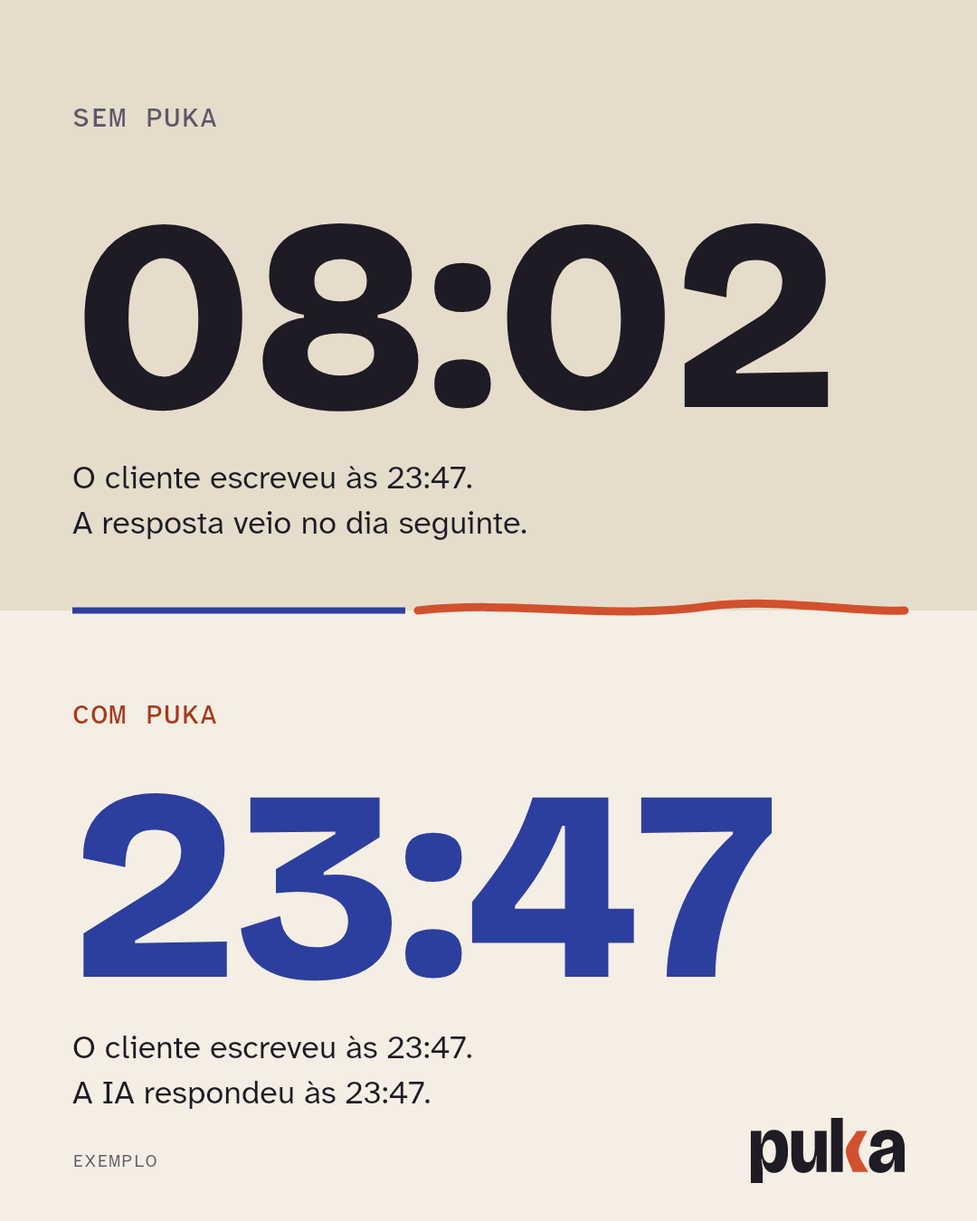
<style>
.page{position:relative;width:977px;height:1221px;background:#f4eee4}
.page>*{position:absolute;margin:0}
.t1{font:27.1px "AtkinsonHyperlegibleMono-Medium";letter-spacing:0.04em;color:#5e5868}
.t2{font:271.3px "BricolageGrotesque-ExtraBold";letter-spacing:-0.012em;color:#1e1b24}
.t3{font:32.6px/45.2px "AtkinsonHyperlegibleNext-Regular";color:#1e1b24}
.t4{font:27.1px "AtkinsonHyperlegibleMono-Medium";letter-spacing:0.04em;color:#a83a1c}
.t5{font:271.3px "BricolageGrotesque-ExtraBold";letter-spacing:-0.012em;color:#2d3f9e}
.t6{font:18.1px "AtkinsonHyperlegibleMono-Regular";letter-spacing:0.04em;color:#5e5868}
</style>
<div class="page">
<p class="t1" style="left:73px;top:109px;width:143px;height:18px">SEM PUKA</p>
<p class="t2" style="left:84px;top:223px;width:744px;height:188px">08:02</p>
<p class="t3" style="left:72px;top:466px;width:454px;height:74px">O cliente escreveu às 23:47.<br>A resposta veio no dia seguinte.</p>
<p class="t4" style="left:73px;top:705px;width:143px;height:18px">COM PUKA</p>
<p class="t5" style="left:83px;top:793px;width:689px;height:188px">23:47</p>
<p class="t3" style="left:72px;top:1035px;width:400px;height:74px">O cliente escreveu às 23:47.<br>A IA respondeu às 23:47.</p>
<p class="t6" style="left:74px;top:1155px;width:82px;height:12px">EXEMPLO</p>
</div>
